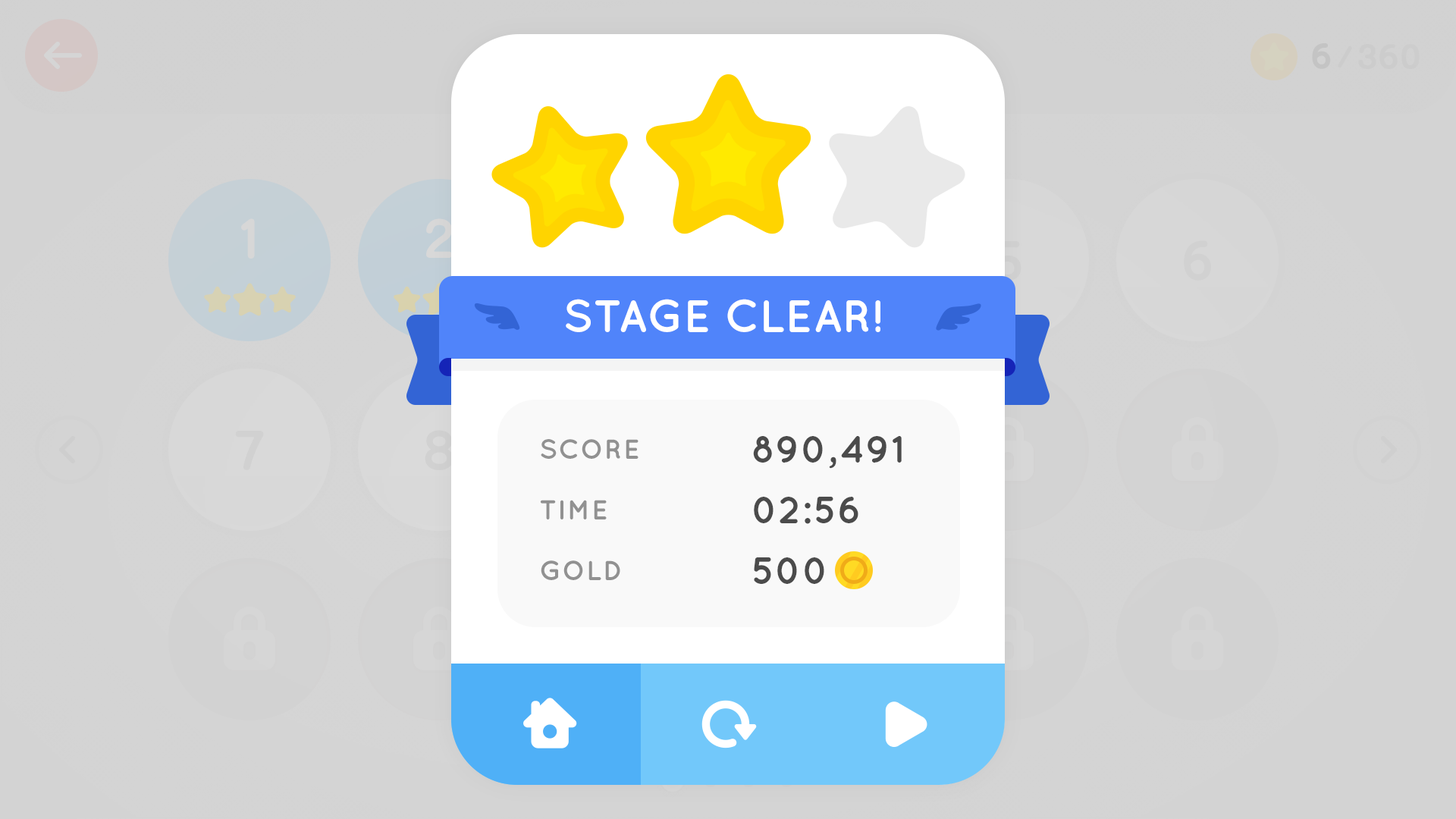
<style>
.page{position:relative;width:1456px;height:819px}
.page>*{position:absolute;margin:0}
.t1{font:45.5px "Quicksand-Bold";color:#ffffff;text-transform:uppercase}
.t2{font:37.9px/60.7px "Quicksand-Bold";color:#4b4b4b;text-transform:uppercase}
.t3{font:27.3px/60.7px "Quicksand-Bold";color:#919191;text-transform:uppercase}
</style>
<div class="page">
<p class="t1" style="left:566px;top:299px;width:314px;height:33px">stage clear!</p>
<p class="t2" style="left:753px;top:436px;width:149px;height:148px">890,491<br>02:56<br>500</p>
<p class="t3" style="left:540px;top:439px;width:99px;height:141px">Score <br>Time<br>Gold</p>
</div>
